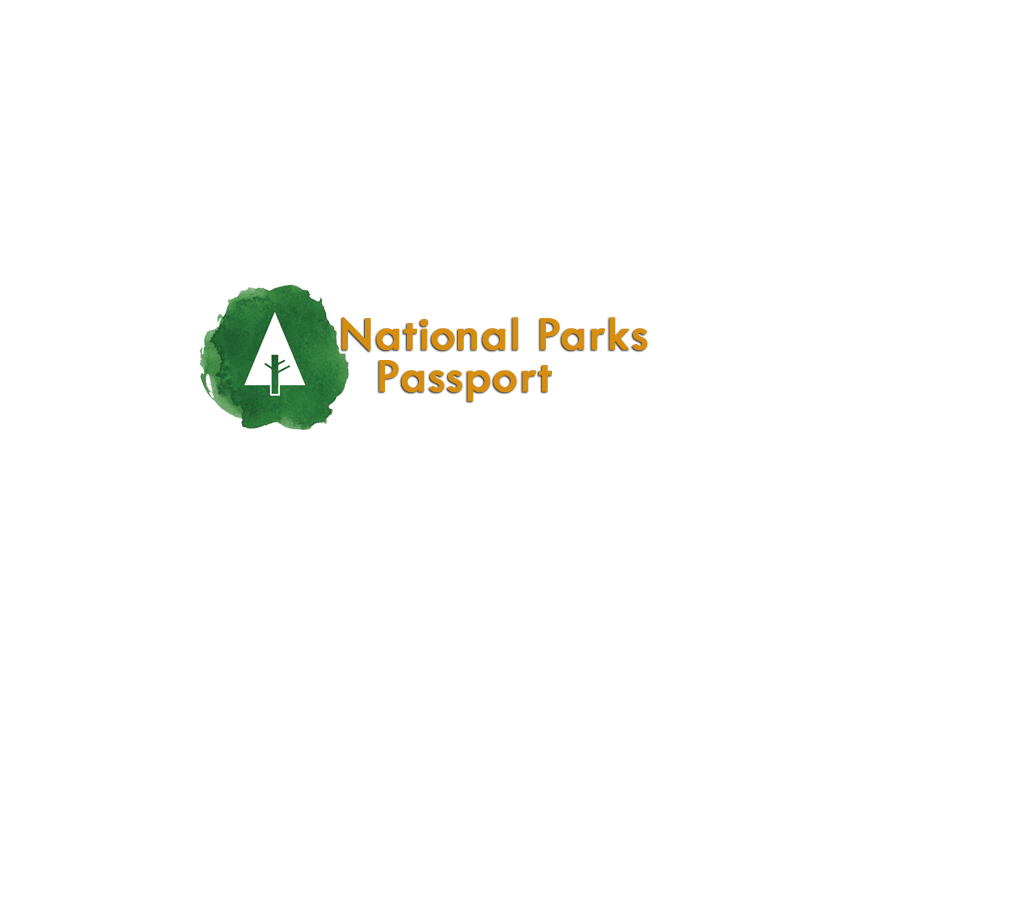
<style>
.page{position:relative;width:1024px;height:900px;background:#ffffff}
.page>*{position:absolute;margin:0}
.t1{font:50px/41.7px "TwCenMT-Regular";color:#d68e10;font-weight:bold}
</style>
<div class="page">
<p class="t1" style="left:342px;top:317px;width:306px;height:85px">National Parks<br> Passport</p>
</div>
